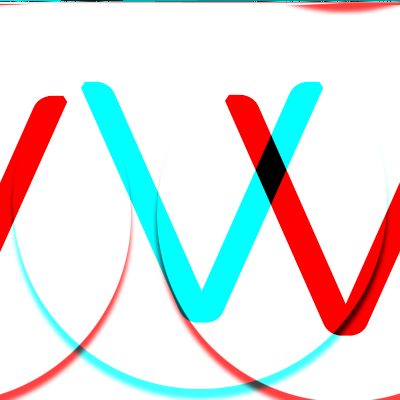
<style>
.page{position:relative;width:400px;height:400px;background:#ffffff}
.page>*{position:absolute;margin:0}
.t1{font:314.8px "Carlito";letter-spacing:-0.06em;color:#00ffff;font-weight:bold}
</style>
<div class="page">
<p class="t1" style="left:81px;top:79px;width:243px;height:242px;rotate:180deg">/\</p>
</div>
